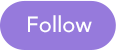
<style>
.page{position:relative;width:116px;height:50px;background:#967adc}
.page>*{position:absolute;margin:0}
.t1{font:22px "AvenirLTStd-Medium";color:#ffffff}
</style>
<div class="page">
<p class="t1" style="left:28px;top:15px;width:64px;height:18px">Follow</p>
</div>
